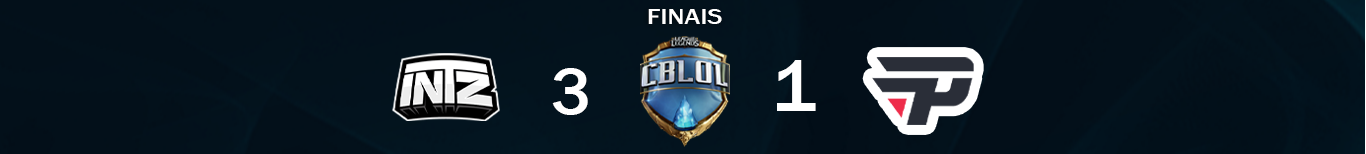
<style>
.page{position:relative;width:1366px;height:154px}
.page>*{position:absolute;margin:0}
.t1{font:21.7px "FranklinGothic-Medium";color:#ffffff;scale:1.22 1}
.t2{font:75.4px "FranklinGothic-Medium";color:#ffffff}
.t3{font:67.6px "FranklinGothic-Medium";color:#ffffff}
</style>
<div class="page">
<p class="t1" style="left:648px;top:9px;width:74px;height:15px">FINAIS</p>
<p class="t2" style="left:777px;top:60px;width:39px;height:51px">1</p>
<p class="t3" style="left:552px;top:68px;width:36px;height:47px">3</p>
</div>
